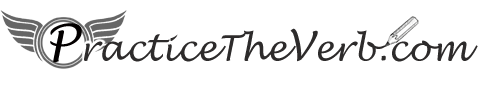
<style>
.page{position:relative;width:482px;height:85px;background:#ffffff}
.page>*{position:absolute;margin:0}
.t1{font:48px "LucidaHandwriting-Italic";color:#030000}
.t2{font:35px "LucidaHandwriting-Italic";color:#2d2b2b}
.t3{font:40px "LucidaHandwriting-Italic";color:#2d2b2b}
</style>
<div class="page">
<p class="t1" style="left:50px;top:23px;width:32px;height:40px">P</p>
<p class="t2" style="left:84px;top:28px;width:394px;height:34px">racticeThe<span class="t3">V</span>erb.com</p>
</div>
